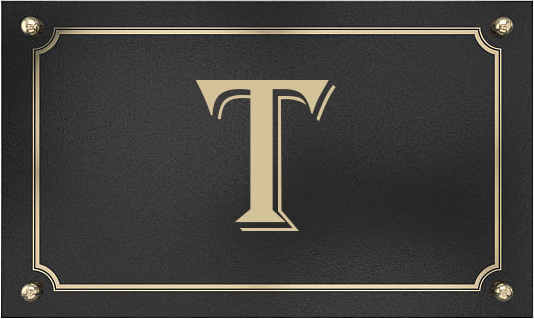
<style>
.page{position:relative;width:534px;height:319px}
.page>*{position:absolute;margin:0}
.t1{font:226px "Algerian";color:#d4c29a}
</style>
<div class="page">
<p class="t1" style="left:195px;top:80px;width:141px;height:151px">T</p>
</div>
